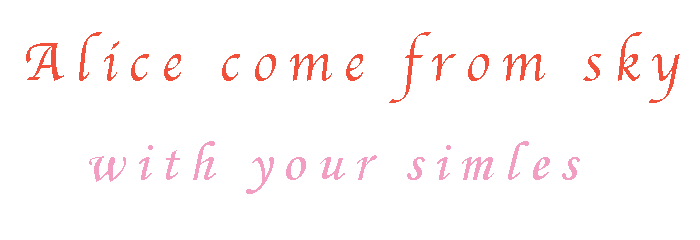
<style>
.page{position:relative;width:700px;height:240px;background:#ffffff}
.page>*{position:absolute;margin:0}
.t1{font:56px "Apple-Chancery";letter-spacing:0.2em;color:#f0503a}
.t2{font:56px "MonotypeCorsiva";letter-spacing:0.2em;color:#f19ec2}
</style>
<div class="page">
<p class="t1" style="left:26px;top:32px;width:654px;height:162px">Alice come from sky<br>   <span class="t2">with your simles</span></p>
</div>
